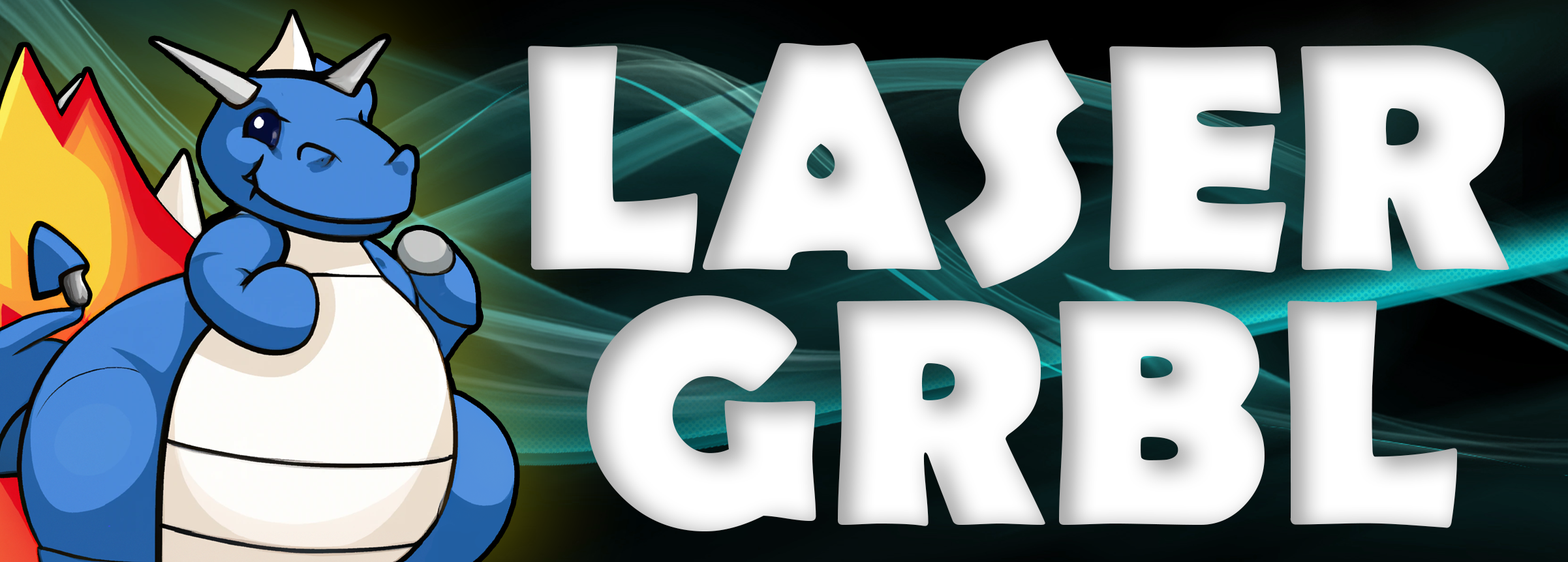
<style>
.page{position:relative;width:1568px;height:562px}
.page>*{position:absolute;margin:0}
.t1{font:326.3px "BerlinSansFB-Bold";color:#ffffff}
</style>
<div class="page">
<p class="t1" style="left:528px;top:40px;width:981px;height:248px">LASER</p>
<p class="t1" style="left:587px;top:296px;width:871px;height:236px">GRBL</p>
</div>
